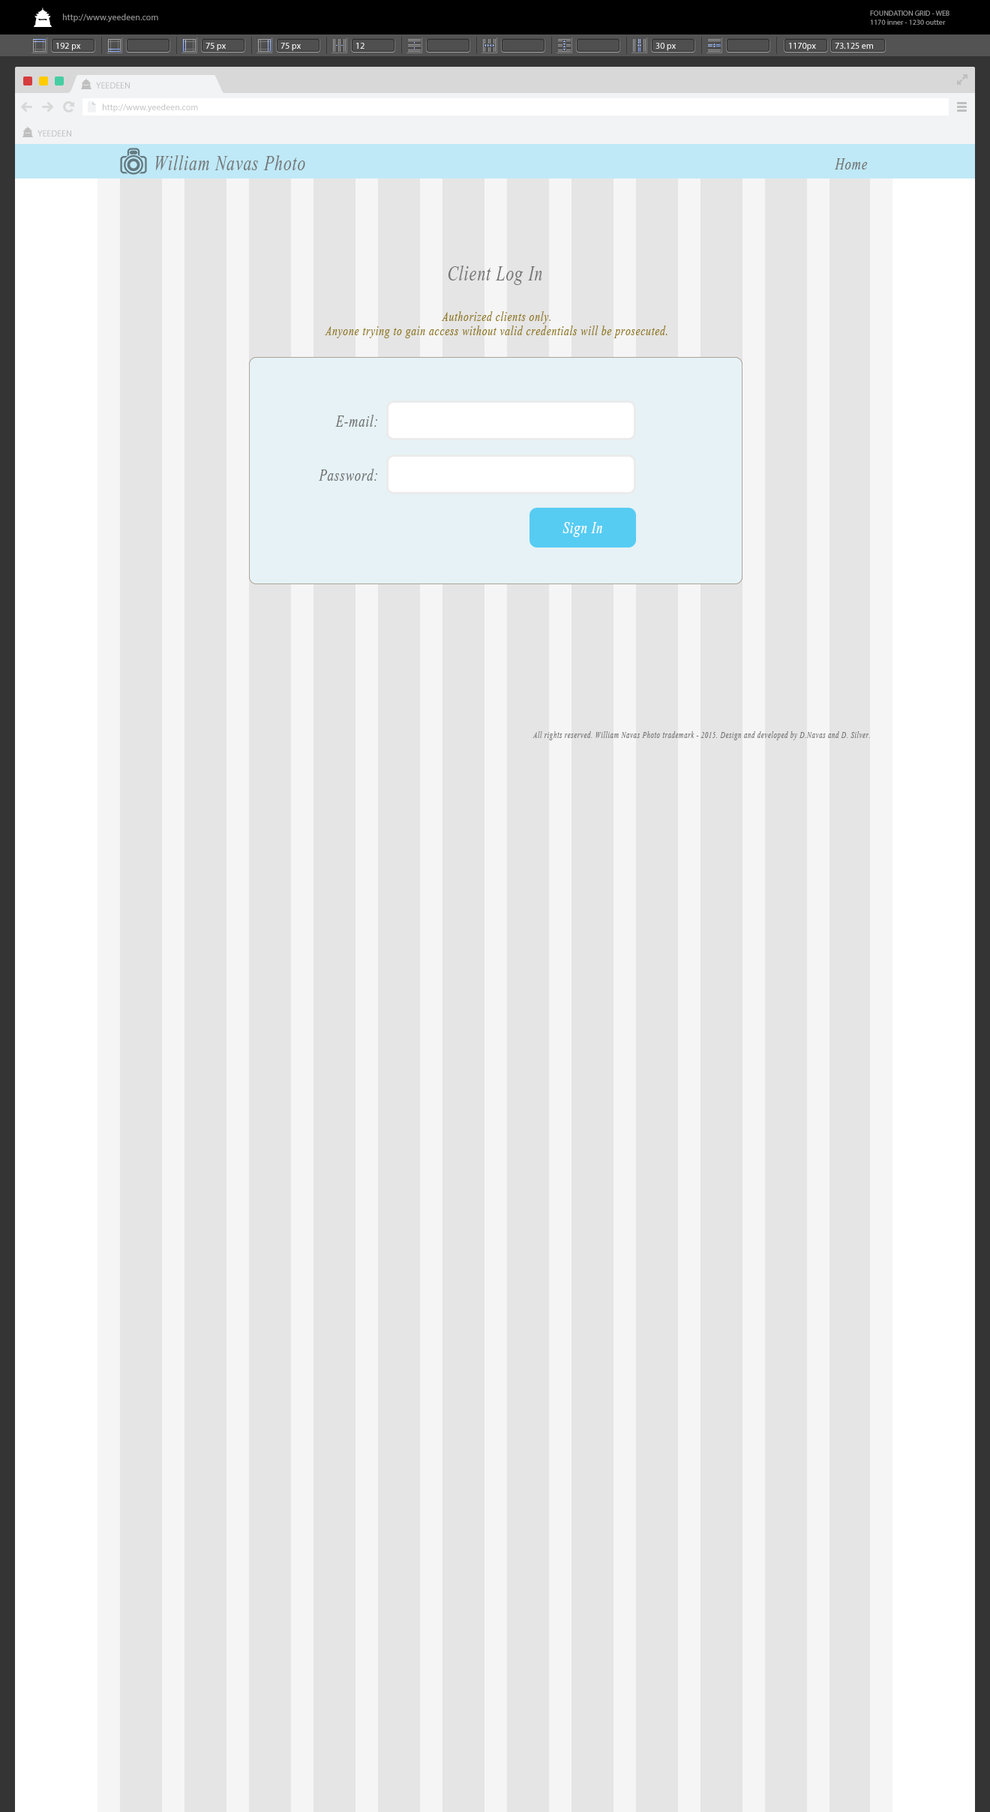
<style>
.page{position:relative;width:990px;height:1812px;background:#e5e5e5}
.page>*{position:absolute;margin:0}
.t1{font:9px "MyriadPro-Regular";color:#999999}
.t2{font:7.5px/9px "MyriadPro-Regular";color:#999999}
.t3{font:9px "MyriadPro-Regular";color:#ffffff}
.t4{font:9px "MyriadPro-Regular"}
.t5{font:9px "MyriadPro-Regular";color:#bfbfbf}
.t6{font:26.8px "Aparajita-Italic";letter-spacing:0.04em;color:#757575;scale:0.75 1}
.t7{font:21px "Aparajita-Italic";letter-spacing:0.04em;color:#747474;scale:0.75 1}
.t8{font:26.8px "Aparajita-Italic";letter-spacing:0.04em;color:#747474;scale:0.75 1}
.t9{font:17.2px/14.2px "Aparajita-Italic";letter-spacing:0.04em;color:#91791b;scale:0.75 1}
.t10{font:21px "Aparajita-Italic";letter-spacing:0.04em;color:#fefefe;scale:0.75 1}
.t11{font:11.5px "Aparajita-Italic";letter-spacing:0.04em;color:#747474;scale:0.75 1}
</style>
<div class="page">
<p class="t1" style="left:63px;top:14px;width:95px;height:8px">http://www.yeedeen.com</p>
<p class="t2" style="left:870px;top:10px;width:80px;height:15px">FOUNDATION GRID - WEB<br>1170 inner - 1230 outter</p>
<p class="t3" style="left:56px;top:43px;width:25px;height:8px">192 px</p>
<p class="t3" style="left:56px;top:43px;width:25px;height:8px">192 px</p>
<p class="t3" style="left:206px;top:43px;width:20px;height:8px">75 px</p>
<p class="t3" style="left:280px;top:43px;width:21px;height:8px">75 px</p>
<p class="t3" style="left:356px;top:43px;width:8px;height:6px">12</p>
<p class="t3" style="left:356px;top:43px;width:8px;height:6px">12</p>
<p class="t3" style="left:656px;top:43px;width:20px;height:8px">30 px</p>
<p class="t3" style="left:656px;top:43px;width:20px;height:8px">30 px</p>
<p class="t4" style="left:789px;top:43px;width:29px;height:8px">1000 px</p>
<p class="t3" style="left:789px;top:43px;width:27px;height:8px">1170px</p>
<p class="t3" style="left:835px;top:43px;width:38px;height:6px">73.125 em</p>
<p class="t5" style="left:96px;top:82px;width:34px;height:6px">YEEDEEN</p>
<p class="t5" style="left:103px;top:104px;width:95px;height:8px">http://www.yeedeen.com</p>
<p class="t5" style="left:38px;top:130px;width:33px;height:6px">YEEDEEN</p>
<p class="t6" style="left:155px;top:155px;width:150px;height:15px">William Navas Photo</p>
<p class="t7" style="left:835px;top:158px;width:33px;height:12px">Home</p>
<p class="t8" style="left:448px;top:266px;width:94px;height:19px">Client Log In</p>
<p class="t9" style="left:325px;top:311px;width:343px;height:27px;text-align:center">Authorized clients only.<br>Anyone trying to gain access without valid credentials will be prosecuted.</p>
<p class="t7" style="left:335px;top:415px;width:42px;height:12px">E-mail:</p>
<p class="t7" style="left:319px;top:469px;width:58px;height:12px">Password:</p>
<p class="t10" style="left:562px;top:522px;width:40px;height:15px">Sign In</p>
<p class="t11" style="left:532px;top:731px;width:338px;height:9px">All rights reserved. William Navas Photo trademark - 2015. Design and developed by D.Navas and D. Silver.</p>
</div>
